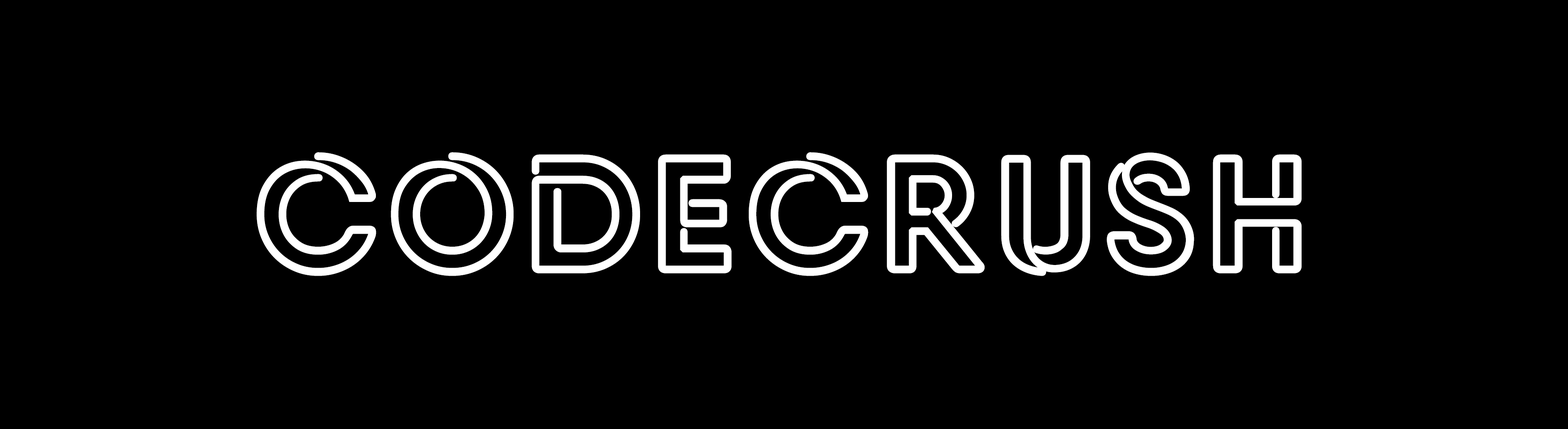
<style>
.page{position:relative;width:1568px;height:429px;background:#000000}
.page>*{position:absolute;margin:0}
.t1{font:186.2px "NEON";letter-spacing:0.05em;color:#ffffff;font-weight:bold}
</style>
<div class="page">
<p class="t1" style="left:257px;top:152px;width:1045px;height:124px">codecrush</p>
</div>
